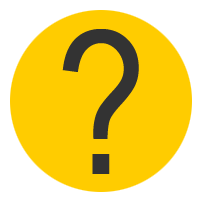
<style>
.page{position:relative;width:200px;height:200px;background:#ffcc00}
.page>*{position:absolute;margin:0}
.t1{font:200px "ArialNarrow";color:#333333}
</style>
<div class="page">
<p class="t1" style="left:62px;top:29px;width:77px;height:145px">?</p>
</div>
